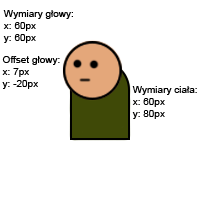
<style>
.page{position:relative;width:200px;height:200px;background:#ffffff}
.page>*{position:absolute;margin:0}
.t1{font:10px "ArialMT";color:#000000}
</style>
<div class="page">
<p class="t1" style="left:3px;top:10px;width:70px;height:33px">Wymiary głowy:<br>x: 60px<br>y: 60px</p>
<p class="t1" style="left:2px;top:56px;width:58px;height:33px">Offset głowy:<br>x: 7px<br>y: -20px</p>
<p class="t1" style="left:132px;top:86px;width:65px;height:33px">Wymiary ciała:<br>x: 60px<br>y: 80px</p>
</div>
